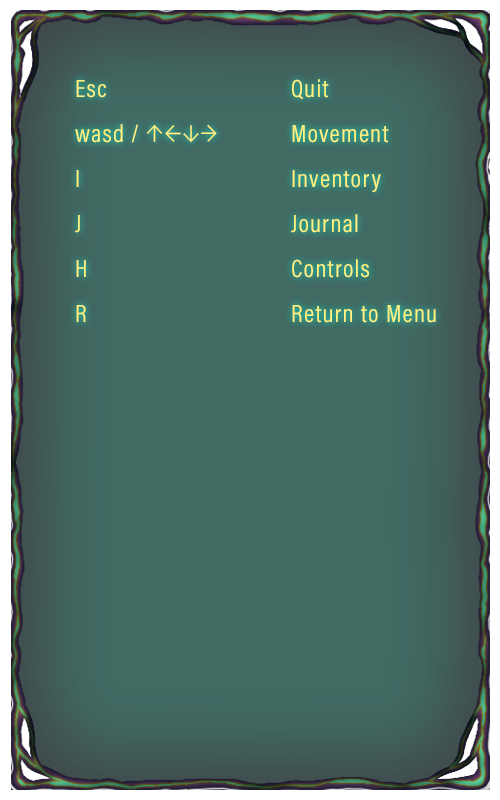
<style>
.page{position:relative;width:500px;height:800px;background:#406a62}
.page>*{position:absolute;margin:0}
.t1{font:25px/45px "AcuminProCond-Regular";letter-spacing:0.05em;color:#fff27e}
</style>
<div class="page">
<p class="t1" style="left:75px;top:79px;width:361px;height:244px">Esc      Quit<br>wasd / ↑←↓→   Movement<br>I      Inventory<br>J      Journal<br>H      Controls<br>R      Return to Menu</p>
</div>
